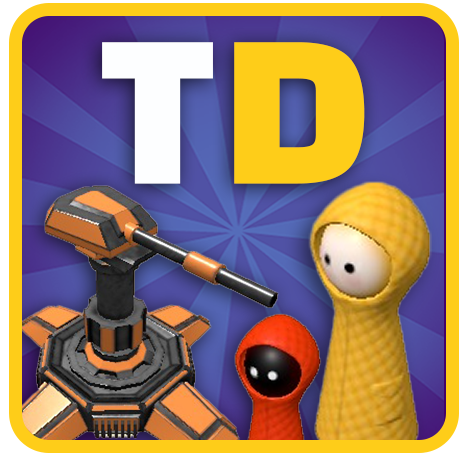
<style>
.page{position:relative;width:466px;height:459px}
.page>*{position:absolute;margin:0}
.t1{font:226px "ChangaOne";letter-spacing:0.04em;color:#fdfeff}
.t2{font:226px "ChangaOne";letter-spacing:0.04em;color:#fecd19}
</style>
<div class="page">
<p class="t1" style="left:102px;top:42px;width:263px;height:142px">T<span class="t2">D</span></p>
</div>
